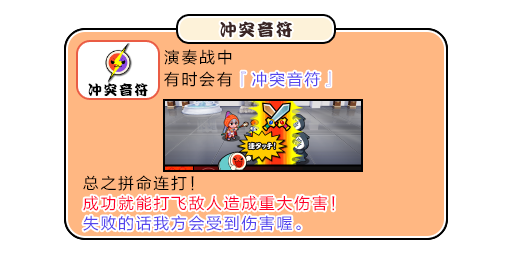
<style>
.page{position:relative;width:512px;height:256px;background:#ffffff}
.page>*{position:absolute;margin:0}
.t1{font:17px "DFPKanTingLiuW9";letter-spacing:0.1em;color:#3b2626}
.t2{font:16px/22px "FZLTHJW--GB1-0";letter-spacing:0.1em;color:#000000}
.t3{font:16px/22px "FZLTHJW--GB1-0";letter-spacing:0.1em;color:#5444ed}
.t4{font:16px "FZLTHJW--GB1-0";letter-spacing:0.1em;color:#5444ed}
.t5{font:14px "DFPKanTingLiuW9";letter-spacing:0.1em;color:#000000}
.t6{font:16px/20px "FZLTHJW--GB1-0";letter-spacing:0.1em;color:#ff002a}
.t7{font:16px/20px "FZLTHJW--GB1-0";letter-spacing:0.1em;color:#000000}
.t8{font:16px/20px "FZLTHJW--GB1-0";letter-spacing:0.1em;color:#5444ed}
.t9{font:16px "FZLTHJW--GB1-0";letter-spacing:0.1em;color:#ff002a}
</style>
<div class="page">
<p class="t1" style="left:220px;top:21px;width:72px;height:17px">冲突音符</p>
<p class="t2" style="left:164px;top:49px;width:167px;height:38px">演奏战中<br>有时会有<span class="t3">『冲突音符』</span></p>
<p class="t4" style="left:241px;top:71px;width:90px;height:16px">『冲突音符』</p>
<p class="t5" style="left:88px;top:83px;width:60px;height:14px">冲突音符</p>
<p class="t6" style="left:83px;top:175px;width:252px;height:56px"><span class="t7">总之拼命连打！<br></span>成功就能打飞敌人造成重大伤害！<br><span class="t8">失败的话我方会受到伤害喔。</span></p>
<p class="t9" style="left:83px;top:195px;width:252px;height:16px">成功就能打飞敌人造成重大伤害！</p>
<p class="t4" style="left:83px;top:215px;width:218px;height:16px">失败的话我方会受到伤害喔。</p>
</div>
